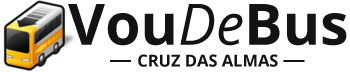
<style>
.page{position:relative;width:350px;height:72px;background:#ffffff}
.page>*{position:absolute;margin:0}
.t1{font:57.1px "OpenSans-Bold";color:#131313}
.t2{font:57.1px "OpenSans-Italic";color:#131313}
.t3{font:16.5px "OpenSans-Bold";color:#131313}
</style>
<div class="page">
<p class="t1" style="left:68px;top:4px;width:279px;height:42px">Vou<span class="t2">De</span>Bus</p>
<p class="t3" style="left:138px;top:54px;width:140px;height:13px">CRUZ DAS ALMAS</p>
</div>
